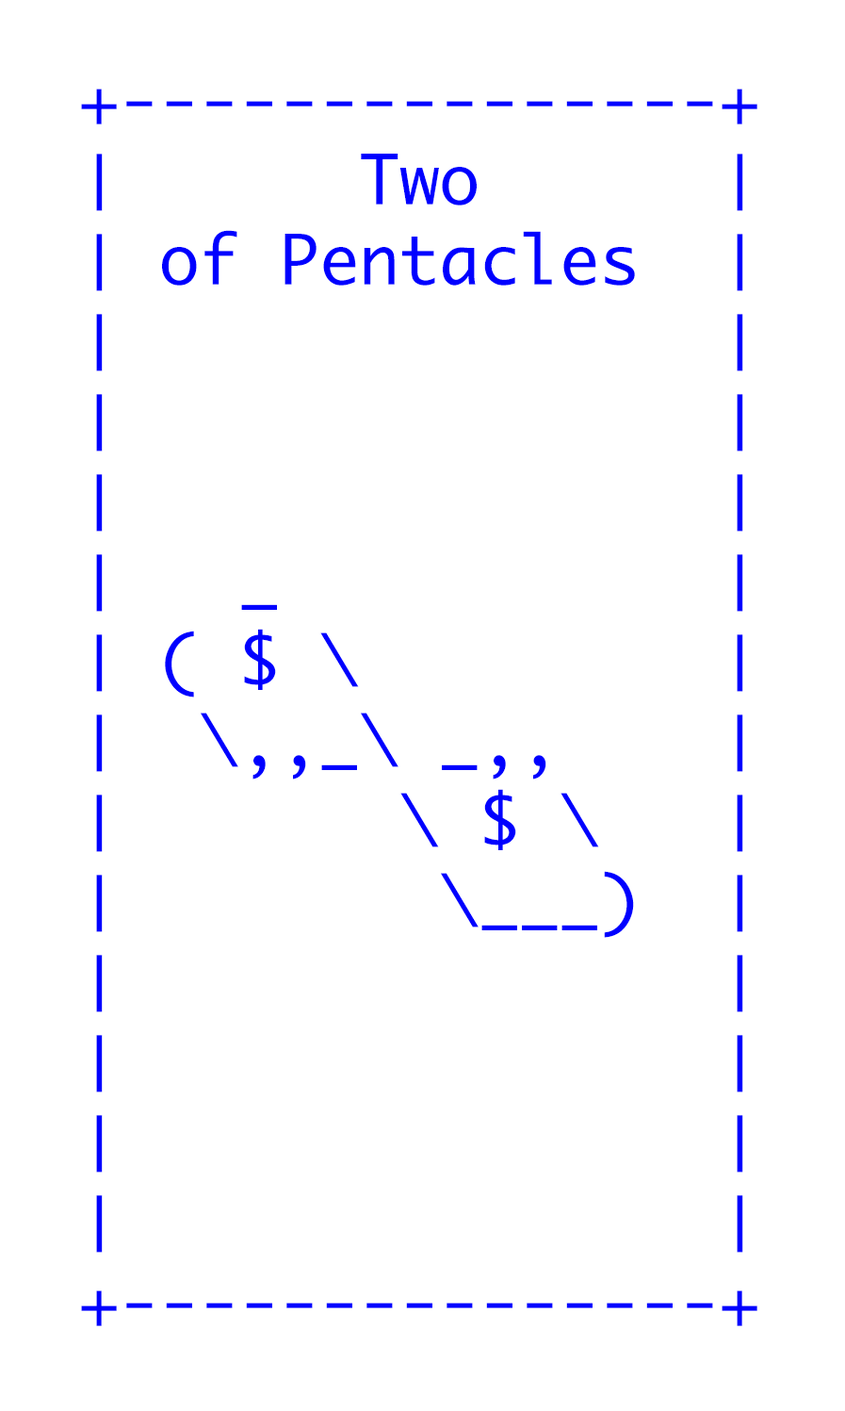
<style>
.page{position:relative;width:845px;height:1411px;background:#ffffff}
.page>*{position:absolute;margin:0}
.t1{font:66.7px "Monaco";color:#0000ff}
</style>
<div class="page">
<p class="t1" style="left:81px;top:89px;width:677px;height:1237px">+---------------+<br>│      Two      │<br>│ of Pentacles  │<br>│               │<br>│               │<br>│               │ <br>│   _           │<br>│ ( $ \         │ <br>│  \,,_\ _,,    │ <br>│       \ $ \   │  <br>│        \___)  │ <br>│               │<br>│               │<br>│               │<br>│               │<br>+---------------+</p>
</div>
